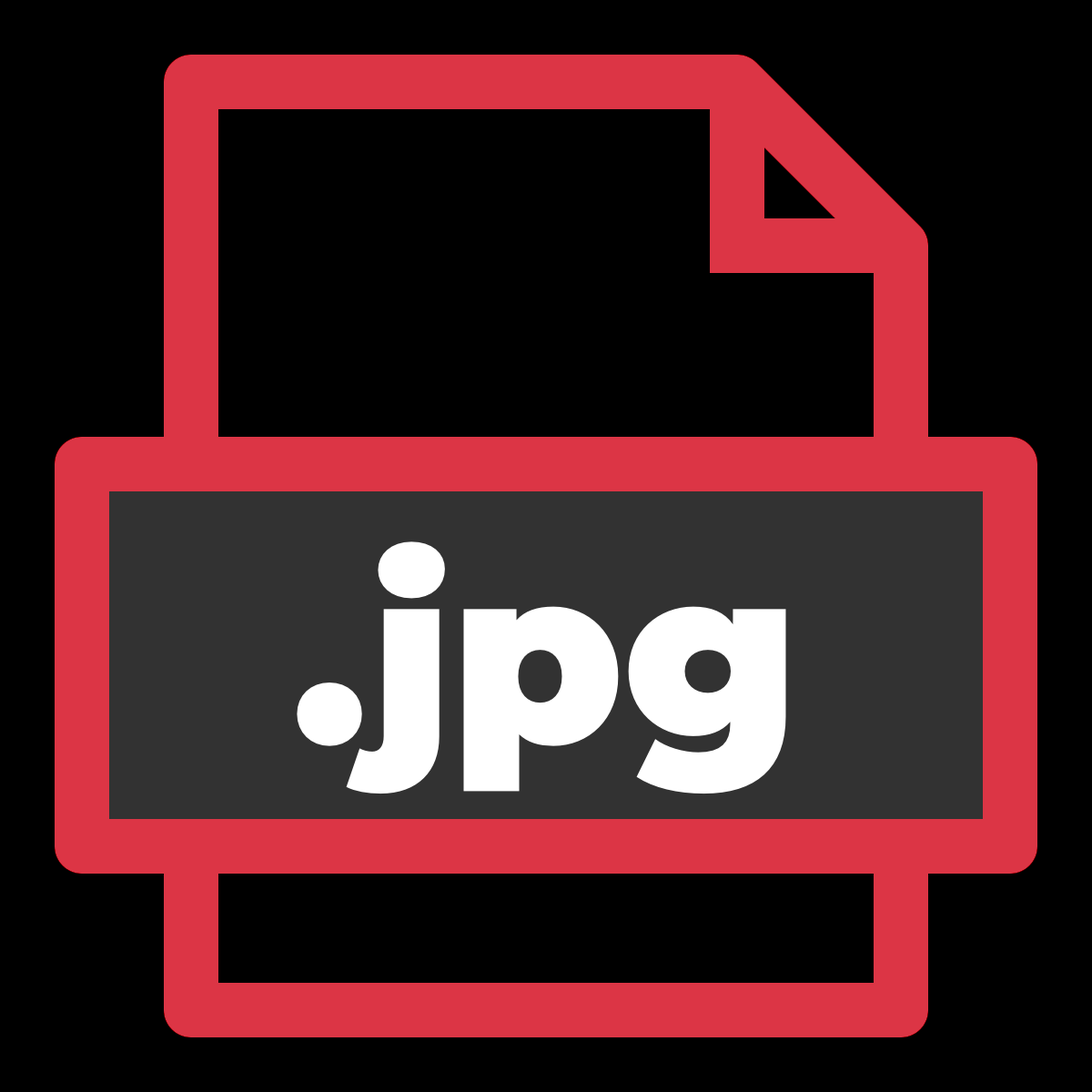
<style>
.page{position:relative;width:1092px;height:1092px;background:#000000}
.page>*{position:absolute;margin:0}
.t1{font:245.7px "Montserrat-Black";color:#ffffff}
</style>
<div class="page">
<p class="t1" style="left:297px;top:541px;width:489px;height:253px">.jpg</p>
</div>
